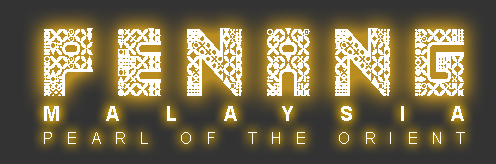
<style>
.page{position:relative;width:496px;height:164px}
.page>*{position:absolute;margin:0}
.t1{font:108px "Antique-Paleoindonesia";letter-spacing:0.2em;color:#ffffff;scale:0.9 1}
.t2{font:21px "Arial-BoldMT";letter-spacing:2.45em;color:#ffffff;scale:0.9 1}
.t3{font:16.5px "ArialMT";letter-spacing:0.965em;color:#ffffff;scale:0.9 1}
</style>
<div class="page">
<p class="t1" style="left:44px;top:28px;width:420px;height:68px">PENANG</p>
<p class="t2" style="left:44px;top:106px;width:420px;height:15px">MALAYSIA</p>
<p class="t3" style="left:44px;top:132px;width:421px;height:12px">PEARL OF THE ORIENT</p>
</div>
